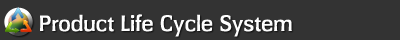
<style>
.page{position:relative;width:400px;height:40px;background:#333333}
.page>*{position:absolute;margin:0}
.t1{font:22px "CarlTellerSH";letter-spacing:0.01em;color:#fefefe}
</style>
<div class="page">
<p class="t1" style="left:40px;top:14px;width:252px;height:23px">Product Life Cycle System</p>
</div>
